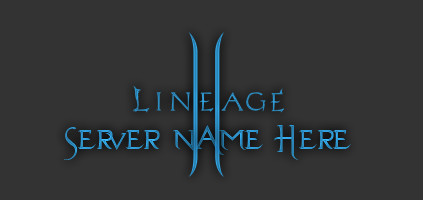
<style>
.page{position:relative;width:423px;height:200px;background:#333333}
.page>*{position:absolute;margin:0}
.t1{font:48px "Evanescent"}
</style>
<div class="page">
<p class="t1" style="left:64px;top:125px;width:287px;height:35px">Server Name Here</p>
</div>
